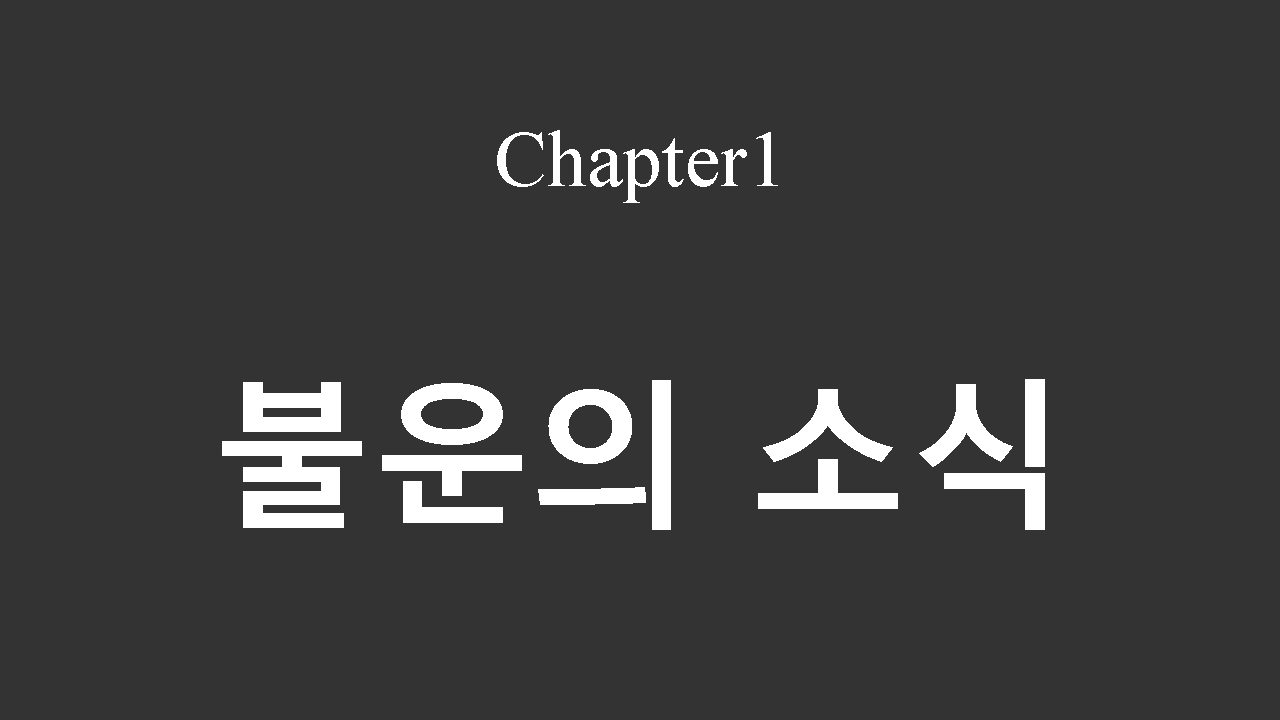
<style>
.page{position:relative;width:1280px;height:720px;background:#333333}
.page>*{position:absolute;margin:0}
.t1{font:80px "TimesNewRomanPSMT";color:#ffffff}
.t2{font:160px "MalgunGothicBold";color:#ffffff}
</style>
<div class="page">
<p class="t1" style="left:497px;top:130px;width:281px;height:73px">Chapter1</p>
<p class="t2" style="left:222px;top:379px;width:823px;height:151px">불운의 소식</p>
</div>
